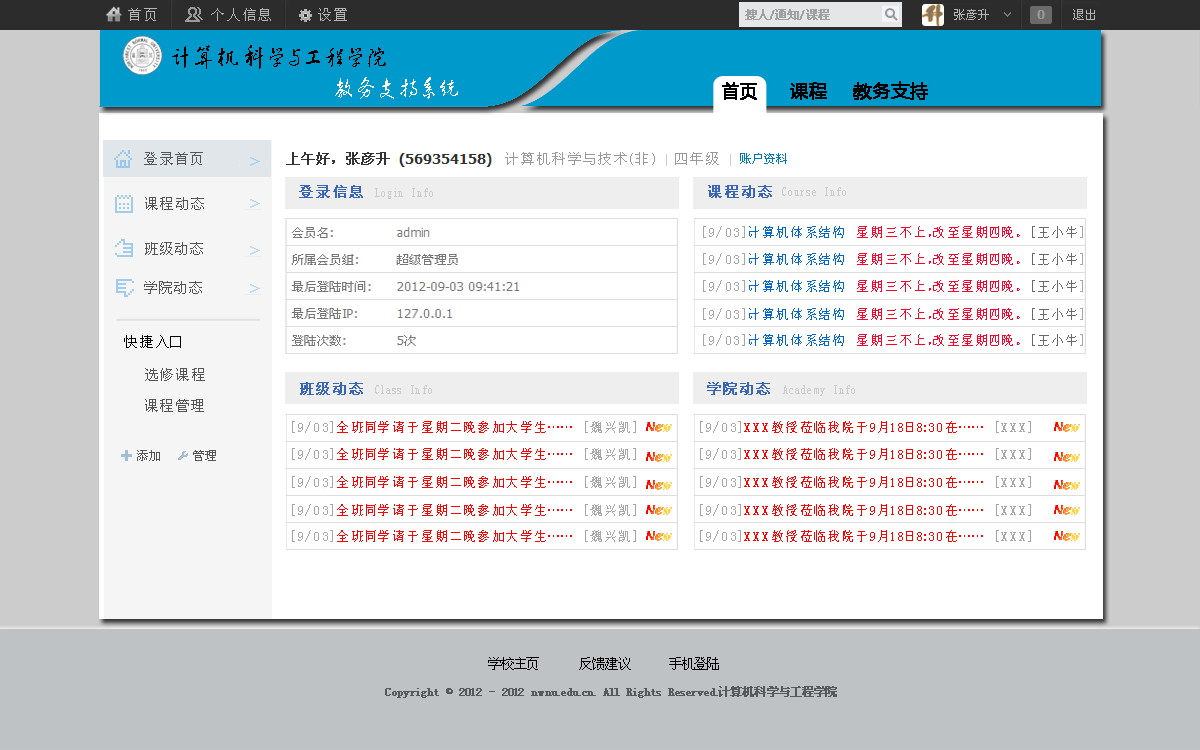
<style>
.page{position:relative;width:1200px;height:750px;background:#ffffff}
.page>*{position:absolute;margin:0}
.t1{font:14px "SimSun";letter-spacing:0.2em;color:#b5b5b5}
.t2{font:12px "SimSun";color:#9fa0a1;font-weight:bold}
.t3{font:25px "FZHCJW--GB1-0";letter-spacing:0.2em;color:#000000}
.t4{font:25px "FZHCJW--GB1-0";letter-spacing:0.2em;color:#ffffff}
.t5{font:18px "MicrosoftYaHei";color:#000000;font-weight:bold}
.t6{font:18px "MicrosoftYaHei";color:#010000;font-weight:bold}
.t7{font:14px "SimSun";letter-spacing:0.2em;color:#545454}
.t8{font:14px "SimSun";letter-spacing:0.2em;color:#999999}
.t9{font:14px "SimSun";letter-spacing:0.2em;color:#3865b8;font-weight:bold}
.t10{font:14px "SimSun";letter-spacing:0.2em;color:#cccccc;scale:0.7 1}
.t11{font:14px "SimSun";letter-spacing:0.2em;color:#ff002a;scale:0.9 1}
.t12{font:14px "SimSun";letter-spacing:0.2em;color:#a6a6a6;scale:0.9 1}
.t13{font:14px "SimSun";letter-spacing:0.2em;color:#0066cc;scale:0.9 1}
.t14{font:14px "SimSun";letter-spacing:0.2em;color:#696969;scale:0.9 1}
.t15{font:14px "SimSun";letter-spacing:0.2em;color:#000000}
.t16{font:14px "SimSun";letter-spacing:0.2em;color:#ff0000;scale:0.9 1}
.t17{font:14px "SimSun";color:#000000}
.t18{font:12px "SimSun";color:#56585a;font-weight:bold}
</style>
<div class="page">
<p class="t1" style="left:128px;top:8px;width:29px;height:13px">首页</p>
<p class="t1" style="left:211px;top:8px;width:60px;height:13px">个人信息</p>
<p class="t1" style="left:318px;top:8px;width:29px;height:13px">设置</p>
<p class="t2" style="left:745px;top:9px;width:85px;height:11px">搜人/通知/课程</p>
<p class="t3" style="left:172px;top:45px;width:214px;height:24px">计算机科学与工程学院</p>
<p class="t4" style="left:335px;top:77px;width:123px;height:22px">教务支持系统</p>
<p class="t5" style="left:722px;top:82px;width:35px;height:18px">首页</p>
<p class="t6" style="left:790px;top:82px;width:37px;height:18px">课程</p>
<p class="t5" style="left:853px;top:81px;width:75px;height:19px">教务支持</p>
<p class="t7" style="left:144px;top:152px;width:59px;height:13px">登录首页</p>
<p class="t8" style="left:505px;top:152px;width:214px;height:13px">计算机科学与技术(非)  四年级</p>
<p class="t9" style="left:299px;top:185px;width:64px;height:13px">登录信息</p>
<p class="t9" style="left:708px;top:185px;width:64px;height:13px">课程动态</p>
<p class="t7" style="left:145px;top:197px;width:59px;height:13px">课程动态</p>
<p class="t10" style="left:375px;top:188px;width:58px;height:11px">Login Info</p>
<p class="t10" style="left:782px;top:187px;width:64px;height:9px">Course Info</p>
<p class="t11" style="left:703px;top:226px;width:380px;height:12px"><span class="t12">[9/03]</span><span class="t13">计算机体系结构 </span>星期三不上，改至星期四晚。 <span class="t14">[王小牛</span><span class="t12">]</span></p>
<p class="t7" style="left:145px;top:242px;width:58px;height:13px">班级动态</p>
<p class="t11" style="left:703px;top:253px;width:380px;height:12px"><span class="t12">[9/03]</span><span class="t13">计算机体系结构 </span>星期三不上，改至星期四晚。 <span class="t14">[王小牛</span><span class="t12">]</span></p>
<p class="t7" style="left:144px;top:281px;width:58px;height:13px">学院动态</p>
<p class="t11" style="left:703px;top:280px;width:380px;height:12px"><span class="t12">[9/03]</span><span class="t13">计算机体系结构 </span>星期三不上，改至星期四晚。 <span class="t14">[王小牛</span><span class="t12">]</span></p>
<p class="t11" style="left:703px;top:308px;width:380px;height:12px"><span class="t12">[9/03]</span><span class="t13">计算机体系结构 </span>星期三不上，改至星期四晚。 <span class="t14">[王小牛</span><span class="t12">]</span></p>
<p class="t15" style="left:124px;top:335px;width:57px;height:13px">快捷入口</p>
<p class="t11" style="left:703px;top:334px;width:380px;height:12px"><span class="t12">[9/03]</span><span class="t13">计算机体系结构 </span>星期三不上，改至星期四晚。 <span class="t14">[王小牛</span><span class="t12">]</span></p>
<p class="t7" style="left:145px;top:368px;width:60px;height:13px">选修课程</p>
<p class="t9" style="left:300px;top:382px;width:63px;height:13px">班级动态</p>
<p class="t10" style="left:375px;top:385px;width:57px;height:9px">Class Info</p>
<p class="t9" style="left:707px;top:382px;width:63px;height:13px">学院动态</p>
<p class="t10" style="left:783px;top:385px;width:72px;height:11px">Academy Info</p>
<p class="t7" style="left:145px;top:399px;width:59px;height:13px">课程管理</p>
<p class="t16" style="left:292px;top:421px;width:344px;height:12px"><span class="t12">[9/03]</span>全班同学请于星期二晚参加大学生……<span class="t12"> [魏兴凯]</span></p>
<p class="t16" style="left:700px;top:421px;width:331px;height:12px"><span class="t12">[9/03]</span>XXX教授莅临我院于9月18日8:30在……<span class="t12"> [XXX]</span></p>
<p class="t16" style="left:292px;top:448px;width:344px;height:12px"><span class="t12">[9/03]</span>全班同学请于星期二晚参加大学生……<span class="t12"> [魏兴凯]</span></p>
<p class="t16" style="left:700px;top:448px;width:331px;height:12px"><span class="t12">[9/03]</span>XXX教授莅临我院于9月18日8:30在……<span class="t12"> [XXX]</span></p>
<p class="t16" style="left:292px;top:476px;width:344px;height:12px"><span class="t12">[9/03]</span>全班同学请于星期二晚参加大学生……<span class="t12"> [魏兴凯]</span></p>
<p class="t16" style="left:700px;top:476px;width:331px;height:12px"><span class="t12">[9/03]</span>XXX教授莅临我院于9月18日8:30在……<span class="t12"> [XXX]</span></p>
<p class="t16" style="left:292px;top:504px;width:344px;height:12px"><span class="t12">[9/03]</span>全班同学请于星期二晚参加大学生……<span class="t12"> [魏兴凯]</span></p>
<p class="t16" style="left:700px;top:504px;width:331px;height:12px"><span class="t12">[9/03]</span>XXX教授莅临我院于9月18日8:30在……<span class="t12"> [XXX]</span></p>
<p class="t16" style="left:292px;top:530px;width:344px;height:12px"><span class="t12">[9/03]</span>全班同学请于星期二晚参加大学生……<span class="t12"> [魏兴凯]</span></p>
<p class="t16" style="left:700px;top:530px;width:331px;height:12px"><span class="t12">[9/03]</span>XXX教授莅临我院于9月18日8:30在……<span class="t12"> [XXX]</span></p>
<p class="t17" style="left:488px;top:657px;width:51px;height:13px">学校主页</p>
<p class="t17" style="left:579px;top:657px;width:52px;height:13px">反馈建议</p>
<p class="t17" style="left:669px;top:657px;width:50px;height:13px">手机登陆</p>
<p class="t18" style="left:385px;top:686px;width:452px;height:12px">Copyright © 2012 - 2012 nwnu.edu.cn. All Rights Reserved.计算机科学与工程学院</p>
</div>
